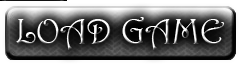
<style>
.page{position:relative;width:242px;height:67px}
.page>*{position:absolute;margin:0}
.t1{font:36px "Harrington"}
</style>
<div class="page">
<p class="t1" style="left:16px;top:17px;width:209px;height:33px">LOAD GAME</p>
</div>
